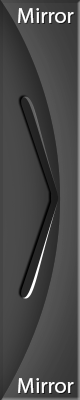
<style>
.page{position:relative;width:80px;height:400px}
.page>*{position:absolute;margin:0}
.t1{font:22px "MyriadPro-Regular";color:#ffffff}
</style>
<div class="page">
<p class="t1" style="left:18px;top:8px;width:56px;height:15px">Mirror</p>
<p class="t1" style="left:18px;top:378px;width:56px;height:15px">Mirror</p>
</div>
